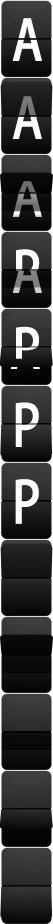
<style>
.page{position:relative;width:53px;height:924px}
.page>*{position:absolute;margin:0}
.t1{font:55px "AdobeHeitiStd-Regular";color:#ffffff;font-variant:small-caps;font-weight:bold;scale:0.85 1}
.t2{font:57px "AdobeHeitiStd-Regular";color:#ffffff;font-variant:small-caps;font-weight:bold;scale:0.85 1}
</style>
<div class="page">
<p class="t1" style="left:12px;top:18px;width:30px;height:43px">A</p>
<p class="t2" style="left:15px;top:479px;width:24px;height:45px">P</p>
</div>
